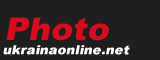
<style>
.page{position:relative;width:160px;height:60px;background:#1f1f1f}
.page>*{position:absolute;margin:0}
.t1{font:31.5px "Arial-Black";color:#d60b1e;font-style:italic;scale:1.05 1}
.t2{font:12.6px "Arial-Black";color:#ffffff;font-style:italic;scale:1.05 1}
</style>
<div class="page">
<p class="t1" style="left:6px;top:17px;width:103px;height:24px">Photo</p>
<p class="t2" style="left:3px;top:45px;width:127px;height:10px">ukrainaonline.net</p>
</div>
